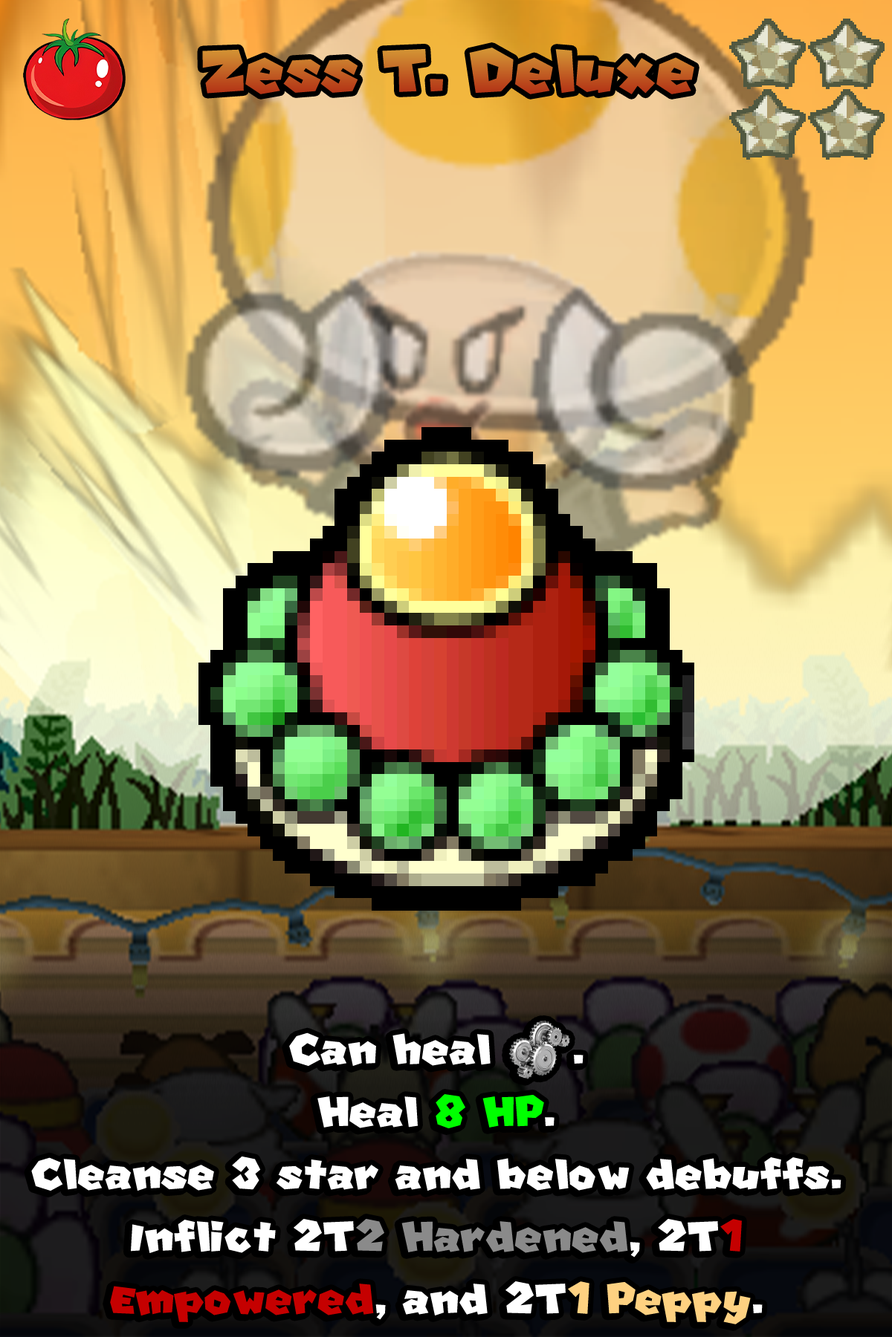
<style>
.page{position:relative;width:892px;height:1337px}
.page>*{position:absolute;margin:0}
.t1{font:144.1px "SuperMario"}
.t2{font:100.3px/62.4px "SuperMario";color:#ffffff}
.t3{font:100.3px/62.4px "stoogedings-Regular";color:#ffffff}
.t4{font:100.3px/62.4px "SuperMario";color:#00ff00}
.t5{font:100.3px/62.4px "SuperMario";color:#8a8a8a}
.t6{font:100.3px/62.4px "SuperMario";color:#c50000}
.t7{font:100.3px/62.4px "SuperMario";color:#fed181}
</style>
<div class="page">
<p class="t1" style="left:202px;top:48px;width:492px;height:46px">Zess T. Deluxe</p>
<p class="t2" style="left:31px;top:1021px;width:810px;height:304px;text-align:center">Can heal <span class="t3">[machine]</span>.<br>Heal <span class="t4">8 HP</span>.<br>Cleanse 3 star and below debuffs.<br>Inflict 2T<span class="t5">2 Hardened</span>, 2T<span class="t6">1 Empowered</span>, and 2T<span class="t7">1 Peppy</span>.</p>
</div>
